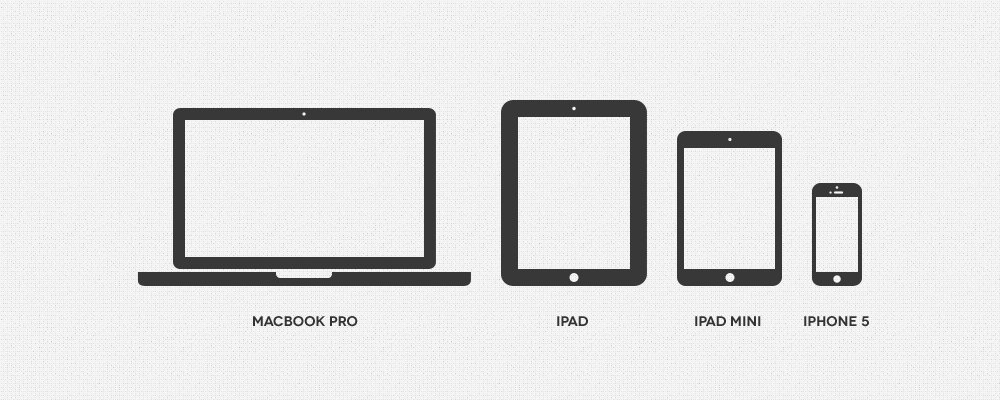
<style>
.page{position:relative;width:1000px;height:400px;background:#f5f5f5}
.page>*{position:absolute;margin:0}
.t1{font:14px "Novecentowide-DemiBold";color:#333333}
</style>
<div class="page">
<p class="t1" style="left:253px;top:316px;width:105px;height:11px">MACBOOK PRO</p>
<p class="t1" style="left:557px;top:316px;width:31px;height:10px">IPAD</p>
<p class="t1" style="left:695px;top:316px;width:66px;height:10px">IPAD MINI</p>
<p class="t1" style="left:804px;top:316px;width:65px;height:11px">iPhone 5</p>
</div>
